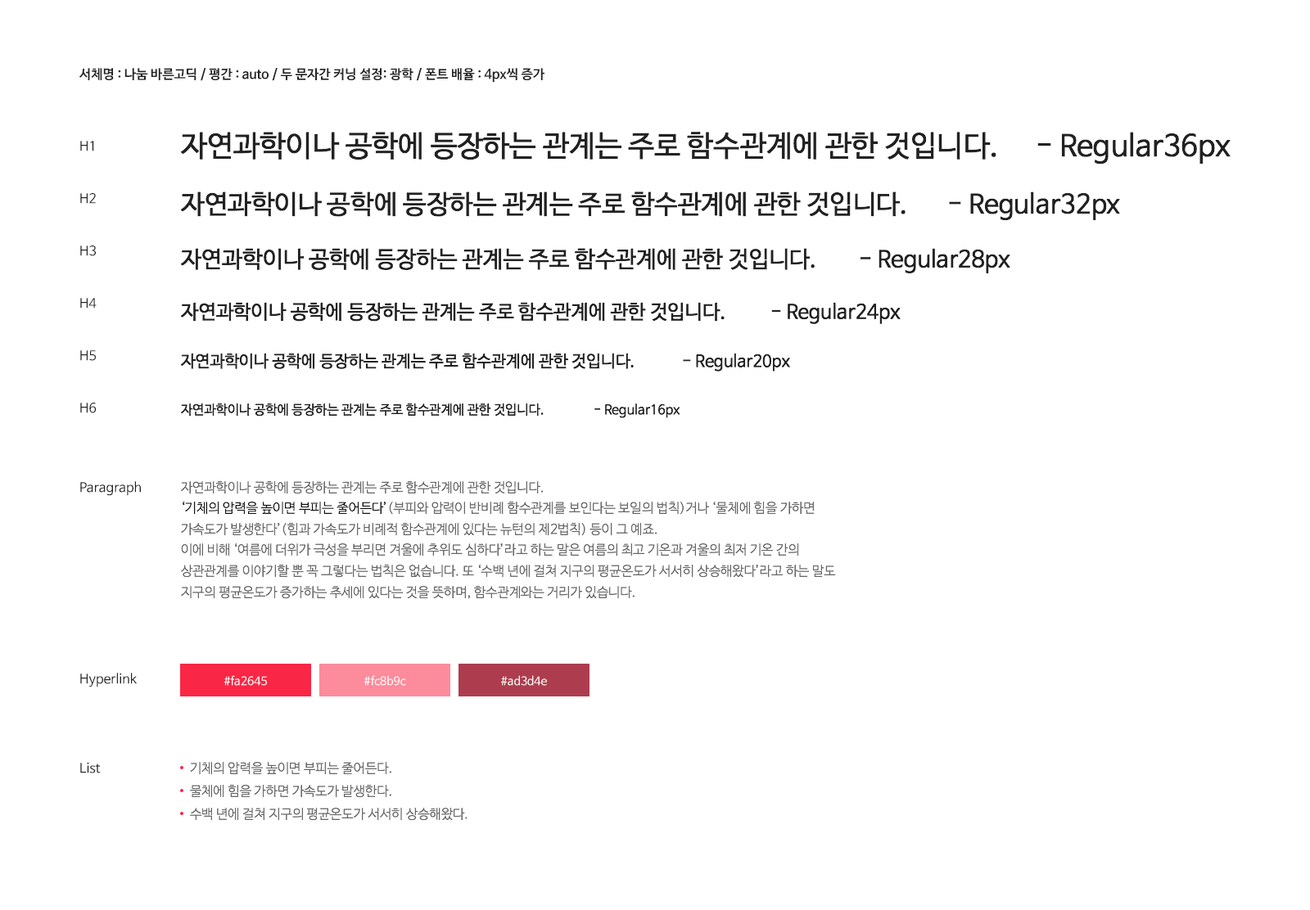
<style>
.page{position:relative;width:1310px;height:910px;background:#ffffff}
.page>*{position:absolute;margin:0}
.t1{font:13.1px "NanumBarunGothicOTFBold";color:#222222}
.t2{font:29.5px "NanumBarunGothicOTF";color:#222222}
.t3{font:13.1px/32.7px "NanumBarunGothicOTF";color:#222222}
.t4{font:26.2px "NanumBarunGothicOTF";color:#222222}
.t5{font:22.9px "NanumBarunGothicOTF";color:#222222}
.t6{font:19.6px "NanumBarunGothicOTF";color:#222222}
.t7{font:16.4px "NanumBarunGothicOTF";color:#222222}
.t8{font:13.1px "NanumBarunGothicOTF";color:#222222}
.t9{font:13.1px "NanumBarunGothicOTFLight";color:#666666}
.t10{font:13.1px "NanumBarunGothicOTFLight";color:#111111}
.t11{font:11.5px "NanumBarunGothicOTF";color:#ffffff}
</style>
<div class="page">
<p class="t1" style="left:79px;top:68px;width:465px;height:15px">서체명 : 나눔 바른고딕 / 평간 : auto / 두 문자간 커닝 설정: 광학 / 폰트 배율 : 4px씩 증가</p>
<p class="t2" style="left:180px;top:132px;width:1050px;height:33px">자연과학이나 공학에 등장하는 관계는 주로 함수관계에 관한 것입니다.  - Regular36px</p>
<p class="t3" style="left:80px;top:141px;width:17px;height:272px">H1<br>H2<br>H3<br>H4<br>H5<br>H6</p>
<p class="t4" style="left:180px;top:192px;width:940px;height:29px">자연과학이나 공학에 등장하는 관계는 주로 함수관계에 관한 것입니다.  - Regular32px</p>
<p class="t5" style="left:180px;top:248px;width:830px;height:25px">자연과학이나 공학에 등장하는 관계는 주로 함수관계에 관한 것입니다.  - Regular28px</p>
<p class="t6" style="left:180px;top:302px;width:721px;height:22px">자연과학이나 공학에 등장하는 관계는 주로 함수관계에 관한 것입니다.  - Regular24px</p>
<p class="t7" style="left:180px;top:353px;width:610px;height:19px">자연과학이나 공학에 등장하는 관계는 주로 함수관계에 관한 것입니다.  - Regular20px</p>
<p class="t8" style="left:181px;top:404px;width:499px;height:14px">자연과학이나 공학에 등장하는 관계는 주로 함수관계에 관한 것입니다.  - Regular16px</p>
<p class="t8" style="left:80px;top:481px;width:61px;height:15px">Paragraph</p>
<p class="t9" style="left:181px;top:481px;width:655px;height:118px">자연과학이나 공학에 등장하는 관계는 주로 함수관계에 관한 것입니다.<br><span class="t10">‘기체의 압력을 높이면 부피는 줄어든다’</span>(부피와 압력이 반비례 함수관계를 보인다는 보일의 법칙)거나 ‘물체에 힘을 가하면 가속도가 발생한다’(힘과 가속도가 비례적 함수관계에 있다는 뉴턴의 제2법칙) 등이 그 예죠. <br>이에 비해 ‘여름에 더위가 극성을 부리면 겨울에 추위도 심하다’라고 하는 말은 여름의 최고 기온과 겨울의 최저 기온 간의 상관관계를 이야기할 뿐 꼭 그렇다는 법칙은 없습니다. 또 ‘수백 년에 걸쳐 지구의 평균온도가 서서히 상승해왔다’라고 하는 말도 지구의 평균온도가 증가하는 추세에 있다는 것을 뜻하며, 함수관계와는 거리가 있습니다.</p>
<p class="t8" style="left:80px;top:673px;width:58px;height:15px">Hyperlink</p>
<p class="t11" style="left:223px;top:675px;width:44px;height:11px">#fa2645</p>
<p class="t11" style="left:363px;top:675px;width:43px;height:11px">#fc8b9c</p>
<p class="t11" style="left:501px;top:675px;width:46px;height:11px">#ad3d4e</p>
<p class="t8" style="left:80px;top:762px;width:21px;height:12px">List</p>
<p class="t9" style="left:189px;top:762px;width:278px;height:59px">기체의 압력을 높이면 부피는 줄어든다.<br>물체에 힘을 가하면 가속도가 발생한다.<br>수백 년에 걸쳐 지구의 평균온도가 서서히 상승해왔다.</p>
</div>
